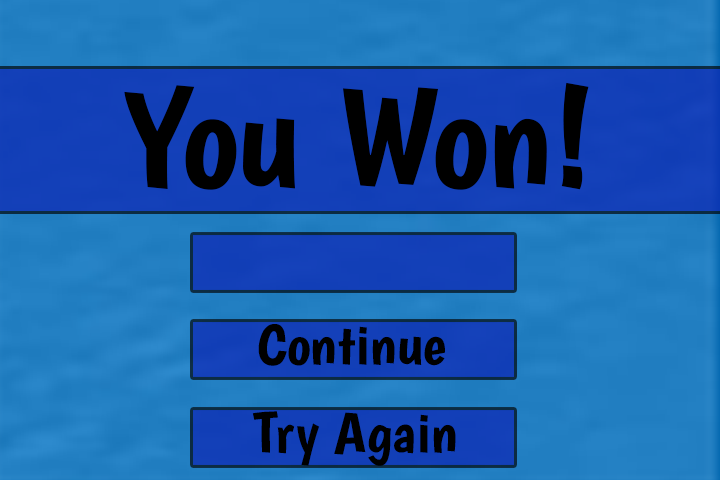
<style>
.page{position:relative;width:720px;height:480px}
.page>*{position:absolute;margin:0}
.t1{font:140.8px "Boogaloo-Regular";color:#000000;scale:1.07 1}
.t2{font:57.1px "Boogaloo-Regular";color:#000000;scale:1.1 1}
</style>
<div class="page">
<p class="t1" style="left:124px;top:82px;width:465px;height:108px">You Won!</p>
<p class="t2" style="left:258px;top:324px;width:187px;height:42px">Continue</p>
<p class="t2" style="left:252px;top:411px;width:204px;height:55px">Try Again</p>
</div>
